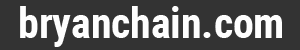
<style>
.page{position:relative;width:300px;height:50px;background:#333333}
.page>*{position:absolute;margin:0}
.t1{font:41.7px "RobotoCondensed-Bold";color:#fefefe}
</style>
<div class="page">
<p class="t1" style="left:20px;top:6px;width:262px;height:41px">bryanchain.com</p>
</div>
